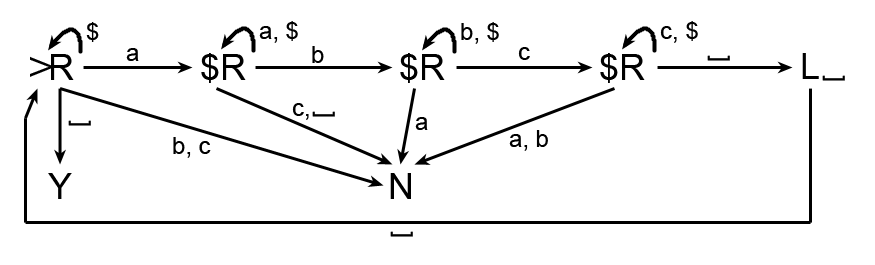
<style>
.page{position:relative;width:875px;height:265px;background:#ffffff}
.page>*{position:absolute;margin:0}
.t1{font:24px "ArialMT";color:#000000}
.t2{font:36px "ArialMT";color:#000000}
.t3{font:30px "ArialMT";color:#000000}
</style>
<div class="page">
<p class="t1" style="left:86px;top:22px;width:13px;height:20px">$</p>
<p class="t1" style="left:259px;top:21px;width:39px;height:22px">a, $</p>
<p class="t1" style="left:461px;top:22px;width:38px;height:22px">b, $</p>
<p class="t1" style="left:660px;top:21px;width:38px;height:22px">c, $</p>
<p class="t2" style="left:51px;top:54px;width:23px;height:26px">R</p>
<p class="t1" style="left:126px;top:48px;width:13px;height:13px">a</p>
<p class="t2" style="left:201px;top:53px;width:45px;height:30px">$R</p>
<p class="t1" style="left:312px;top:46px;width:12px;height:17px">b</p>
<p class="t2" style="left:400px;top:53px;width:45px;height:30px">$R</p>
<p class="t1" style="left:518px;top:47px;width:12px;height:13px">c</p>
<p class="t2" style="left:600px;top:53px;width:45px;height:30px">$R</p>
<p class="t2" style="left:802px;top:53px;width:17px;height:26px">L</p>
<p class="t3" style="left:30px;top:56px;width:22px;height:21px;rotate:-90deg">V</p>
<p class="t1" style="left:707px;top:55px;width:23px;height:6px;rotate:-90deg">[</p>
<p class="t1" style="left:822px;top:75px;width:23px;height:6px;rotate:-90deg">[</p>
<p class="t1" style="left:292px;top:103px;width:17px;height:17px">c,</p>
<p class="t1" style="left:312px;top:111px;width:23px;height:6px;rotate:-90deg">[</p>
<p class="t1" style="left:68px;top:120px;width:23px;height:6px;rotate:-90deg">[</p>
<p class="t1" style="left:415px;top:117px;width:13px;height:13px">a</p>
<p class="t1" style="left:173px;top:137px;width:38px;height:21px">b, c</p>
<p class="t1" style="left:509px;top:130px;width:39px;height:21px">a, b</p>
<p class="t2" style="left:48px;top:173px;width:24px;height:26px">Y</p>
<p class="t2" style="left:390px;top:173px;width:21px;height:26px">N</p>
<p class="t1" style="left:390px;top:231px;width:23px;height:6px;rotate:-90deg">[</p>
</div>
